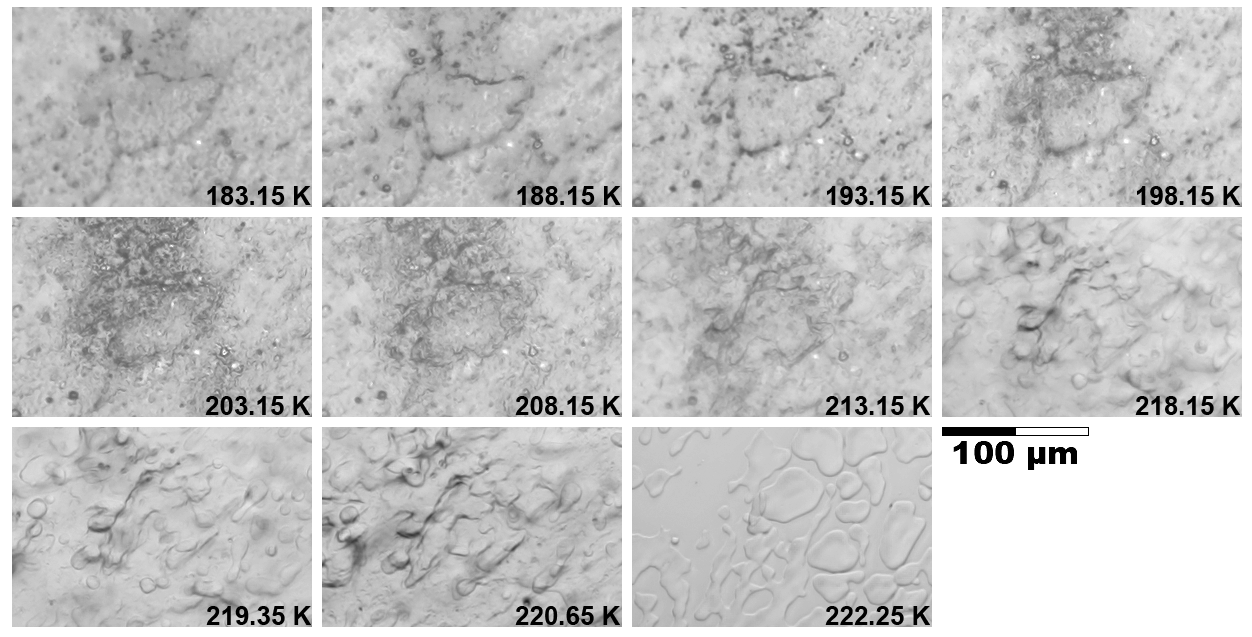
<style>
.page{position:relative;width:1252px;height:637px}
.page>*{position:absolute;margin:0}
.t1{font:26px "Arial-BoldMT";color:#000000}
</style>
<div class="page">
<p class="t1" style="left:207px;top:186px;width:104px;height:19px">183.15 K</p>
<p class="t1" style="left:517px;top:186px;width:104px;height:19px">188.15 K</p>
<p class="t1" style="left:827px;top:186px;width:103px;height:19px">193.15 K</p>
<p class="t1" style="left:1137px;top:186px;width:103px;height:19px">198.15 K</p>
<p class="t1" style="left:205px;top:396px;width:105px;height:19px">203.15 K</p>
<p class="t1" style="left:515px;top:396px;width:105px;height:19px">208.15 K</p>
<p class="t1" style="left:825px;top:396px;width:105px;height:19px">213.15 K</p>
<p class="t1" style="left:1135px;top:396px;width:105px;height:19px">218.15 K</p>
<p class="t1" style="left:206px;top:606px;width:105px;height:19px">219.35 K</p>
<p class="t1" style="left:515px;top:606px;width:105px;height:19px">220.65 K</p>
<p class="t1" style="left:825px;top:606px;width:105px;height:19px">222.25 K</p>
</div>
